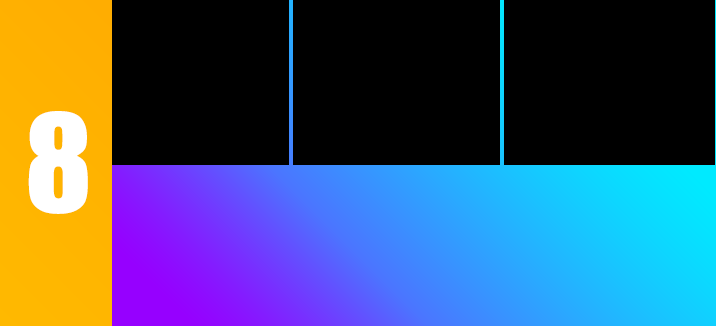
<style>
.page{position:relative;width:716px;height:326px;background:#000000}
.page>*{position:absolute;margin:0}
.t1{font:125px "Impact";color:#ffffff}
</style>
<div class="page">
<p class="t1" style="left:28px;top:111px;width:60px;height:103px">8</p>
</div>
